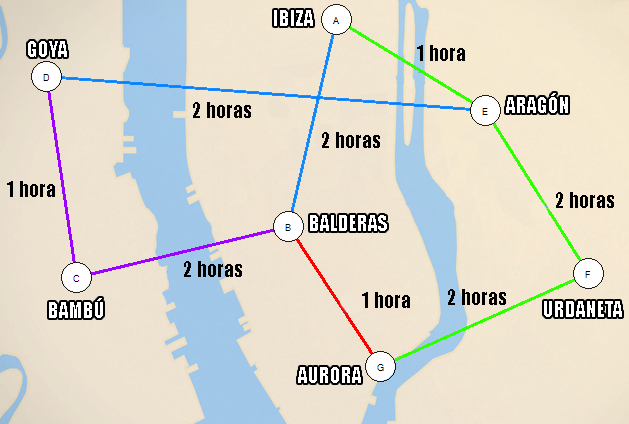
<style>
.page{position:relative;width:629px;height:424px}
.page>*{position:absolute;margin:0}
.t1{font:20px "Impact";color:#ffffff}
.t2{font:20px "Impact";color:#000000}
</style>
<div class="page">
<p class="t1" style="left:274px;top:10px;width:39px;height:16px">IBIZA</p>
<p class="t1" style="left:28px;top:41px;width:39px;height:16px">GOYA</p>
<p class="t2" style="left:417px;top:45px;width:48px;height:16px">1 hora</p>
<p class="t2" style="left:193px;top:102px;width:58px;height:16px">2 horas</p>
<p class="t1" style="left:506px;top:93px;width:62px;height:20px">ARAGÓN</p>
<p class="t2" style="left:322px;top:132px;width:58px;height:16px">2 horas</p>
<p class="t2" style="left:7px;top:181px;width:48px;height:16px">1 hora</p>
<p class="t2" style="left:556px;top:192px;width:58px;height:16px">2 horas</p>
<p class="t1" style="left:310px;top:215px;width:77px;height:16px">BALDERAS</p>
<p class="t2" style="left:184px;top:261px;width:58px;height:16px">2 horas</p>
<p class="t2" style="left:362px;top:292px;width:48px;height:16px">1 hora</p>
<p class="t2" style="left:448px;top:289px;width:58px;height:16px">2 horas</p>
<p class="t1" style="left:49px;top:298px;width:54px;height:20px">BAMBÚ</p>
<p class="t1" style="left:544px;top:301px;width:78px;height:16px">URDANETA</p>
<p class="t1" style="left:298px;top:367px;width:63px;height:16px">AURORA</p>
</div>
